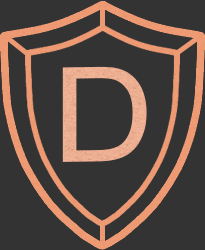
<style>
.page{position:relative;width:205px;height:250px;background:#333333}
.page>*{position:absolute;margin:0}
.t1{font:131.9px "ArialMT";color:#edaf92;scale:1.07 1}
</style>
<div class="page">
<p class="t1" style="left:62px;top:66px;width:85px;height:96px;rotate:-1deg">D</p>
<p class="t1" style="left:62px;top:66px;width:85px;height:96px;rotate:-1deg">D</p>
</div>
